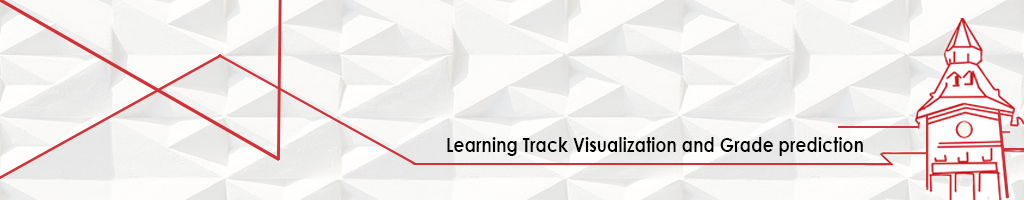
<style>
.page{position:relative;width:1024px;height:200px}
.page>*{position:absolute;margin:0}
.t1{font:19.7px "CenturyGothic-Bold";color:#000000;scale:0.88 1}
</style>
<div class="page">
<p class="t1" style="left:447px;top:137px;width:416px;height:19px">Learning Track Visualization and Grade prediction</p>
</div>
